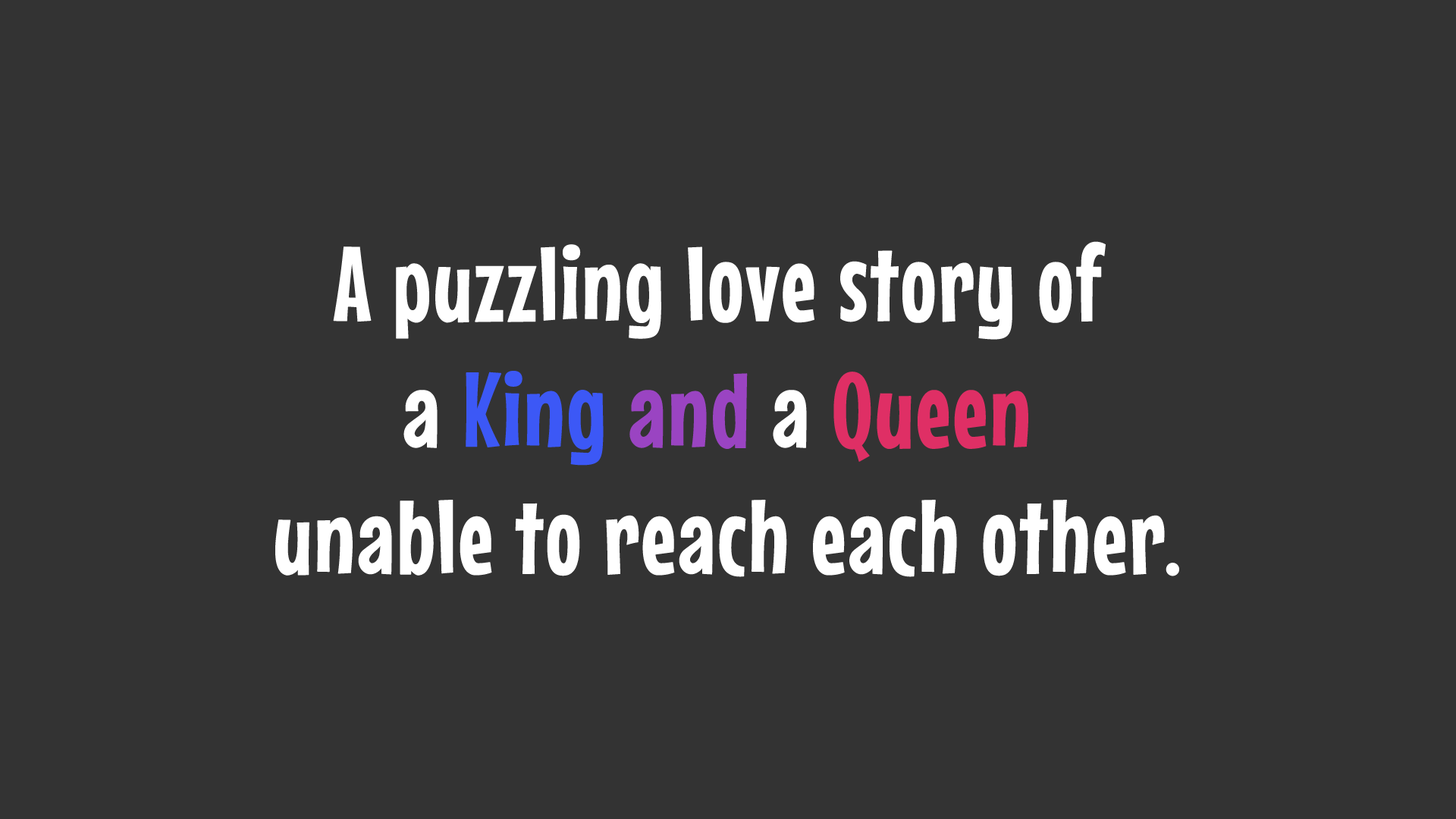
<style>
.page{position:relative;width:1456px;height:819px;background:#333333}
.page>*{position:absolute;margin:0}
.t1{font:105.3px "MouseMemoirs-Regular";color:#ffffff;font-weight:bold}
.t2{font:105.3px "MouseMemoirs-Regular";color:#3c58f6;font-weight:bold}
.t3{font:105.3px "MouseMemoirs-Regular";color:#9a44c2;font-weight:bold}
.t4{font:105.3px "MouseMemoirs-Regular";color:#df2f65;font-weight:bold}
</style>
<div class="page">
<p class="t1" style="left:275px;top:241px;width:904px;height:336px;text-align:center">A puzzling love story of <br>a <span class="t2">King </span><span class="t3">and</span> a <span class="t4">Queen</span> <br>unable to reach each other.</p>
</div>
